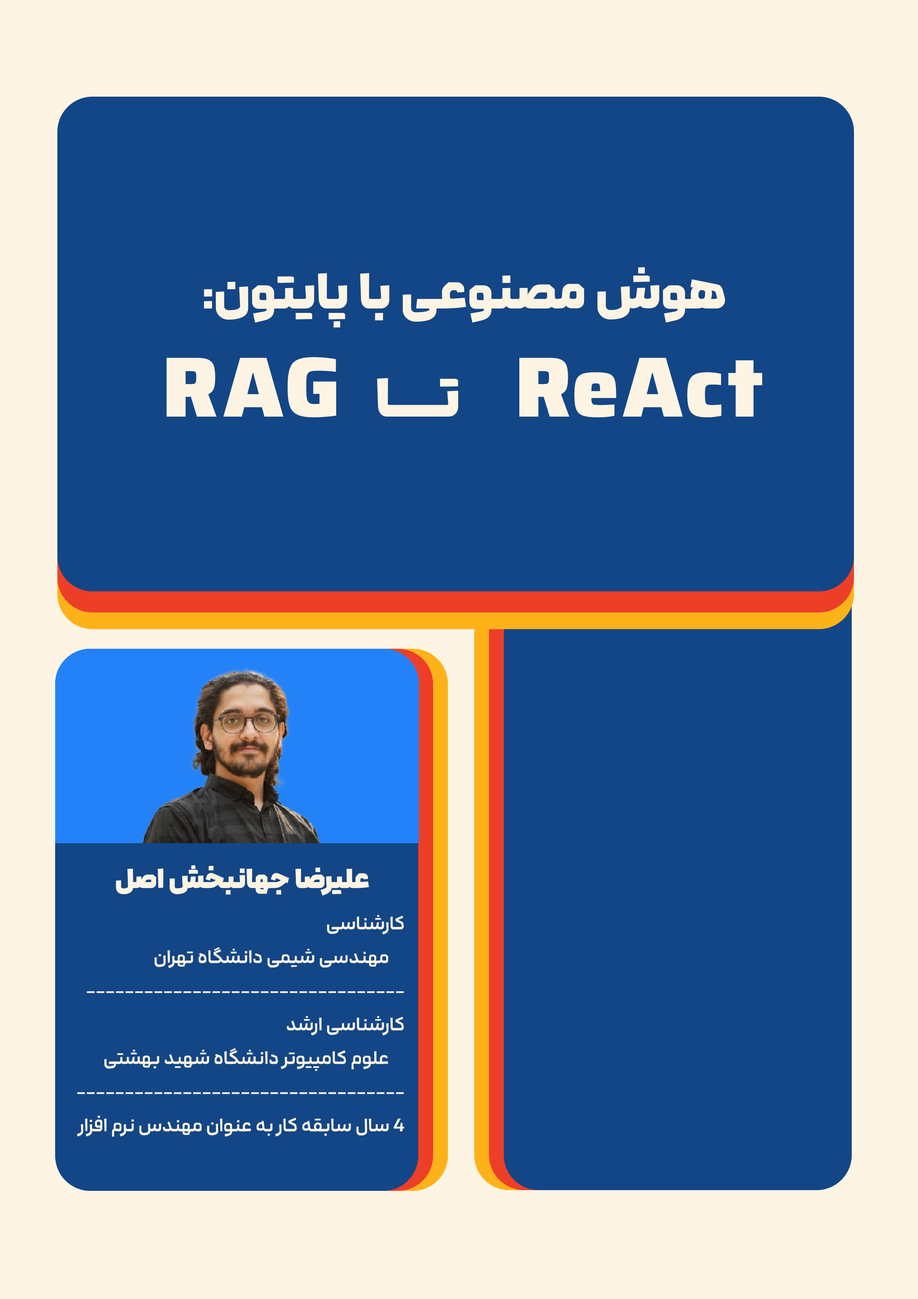
<style>
.page{position:relative;width:918px;height:1299px;background:#134686}
.page>*{position:absolute;margin:0}
.t1{font:46.3px/108px "LahzehFamily-Bold";color:#fdf4e3}
.t2{font:77.1px/108px "LahzehFamily-ExtraBold";color:#fdf4e3}
.t3{font:49.4px/108px "LahzehFamily-ExtraBold";color:#fdf4e3}
.t4{font:24.7px "LahzehFamily-ExtraBold";color:#fdf4e3}
.t5{font:17.6px/33.7px "LahzehFamily-Medium";color:#fdf4e3}
</style>
<div class="page">
<p class="t1" style="left:167px;top:267px;width:596px;height:150px;text-align:center">هوش مصنوعی با پایتون:<br>   <span class="t2">ReAct </span><span class="t3">تـــــا    </span><span class="t2">RAG</span></p>
<p class="t4" style="left:116px;top:865px;width:253px;height:31px">علیرضا جهانبخش اصل</p>
<p class="t5" style="left:77px;top:915px;width:327px;height:222px">کارشناسی<br>  مهندسی شیمی دانشگاه تهران<br>---------------------------------<br>کارشناسی ارشد<br>  علوم کامپیوتر دانشگاه شهید بهشتی <br>----------------------------------<br>4 سال سابقه کار به عنوان مهندس نرم افزار</p>
</div>
